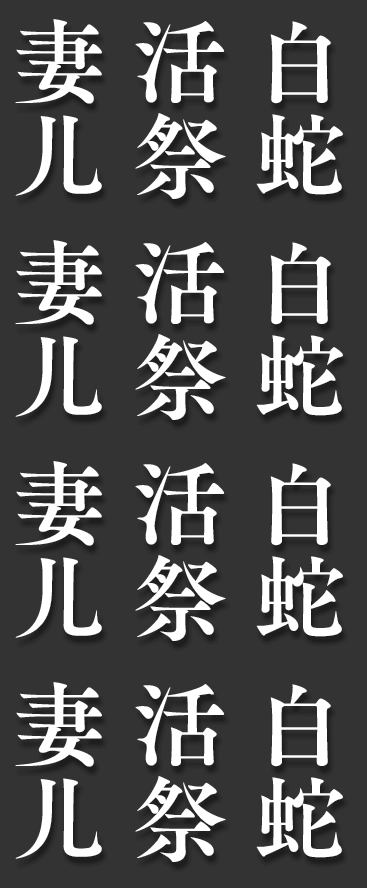
<style>
.page{position:relative;width:367px;height:888px;background:#333333}
.page>*{position:absolute;margin:0}
.t1{font:93px "FZFW-ZhuZiAOldMin-B--GB1-0";color:#ffffff}
.t2{font:94.4px "FZFW-ZhuZiAOldMin-B--GB1-0";color:#ffffff}
.t3{font:91.1px "FZFW-ZhuZiAOldMin-B--GB1-0";color:#ffffff}
</style>
<div class="page">
<p class="t1" style="left:15px;top:19px;width:87px;height:177px">妻儿</p>
<p class="t2" style="left:135px;top:21px;width:91px;height:178px">活祭</p>
<p class="t3" style="left:256px;top:21px;width:87px;height:174px">白蛇</p>
<p class="t1" style="left:15px;top:240px;width:87px;height:177px">妻儿</p>
<p class="t2" style="left:135px;top:242px;width:91px;height:178px">活祭</p>
<p class="t3" style="left:256px;top:242px;width:87px;height:174px">白蛇</p>
<p class="t1" style="left:15px;top:461px;width:87px;height:177px">妻儿</p>
<p class="t2" style="left:135px;top:463px;width:91px;height:178px">活祭</p>
<p class="t3" style="left:256px;top:463px;width:87px;height:174px">白蛇</p>
<p class="t1" style="left:15px;top:682px;width:87px;height:177px">妻儿</p>
<p class="t2" style="left:135px;top:684px;width:91px;height:178px">活祭</p>
<p class="t3" style="left:256px;top:684px;width:87px;height:174px">白蛇</p>
</div>
